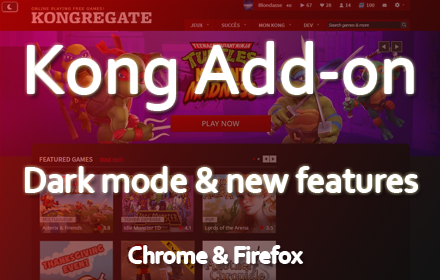
<style>
.page{position:relative;width:440px;height:280px}
.page>*{position:absolute;margin:0}
.t1{font:72px "Corbel";color:#ffffff}
.t2{font:36px "Corbel";color:#ffffff}
.t3{font:24px "Corbel";color:#ffffff}
</style>
<div class="page">
<p class="t1" style="left:28px;top:42px;width:385px;height:68px">Kong Add-on</p>
<p class="t2" style="left:26px;top:167px;width:391px;height:25px">Dark mode &amp; new features</p>
<p class="t3" style="left:129px;top:246px;width:174px;height:17px">Chrome &amp; Firefox</p>
</div>
